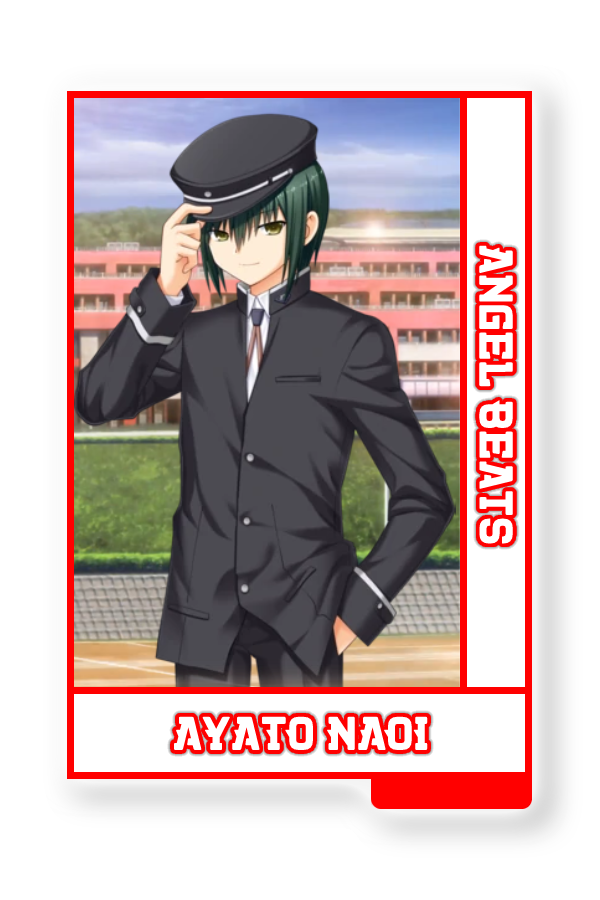
<style>
.page{position:relative;width:600px;height:900px;background:#ffffff}
.page>*{position:absolute;margin:0}
.t1{font:48.8px "KillerCollege";color:#ffffff}
.t2{font:48.6px "KillerCollege";color:#ffffff}
</style>
<div class="page">
<p class="t1" style="left:479px;top:245px;width:34px;height:299px;rotate:90deg">Angel Beats</p>
<p class="t2" style="left:174px;top:716px;width:254px;height:35px">AYATO NAOI</p>
</div>
